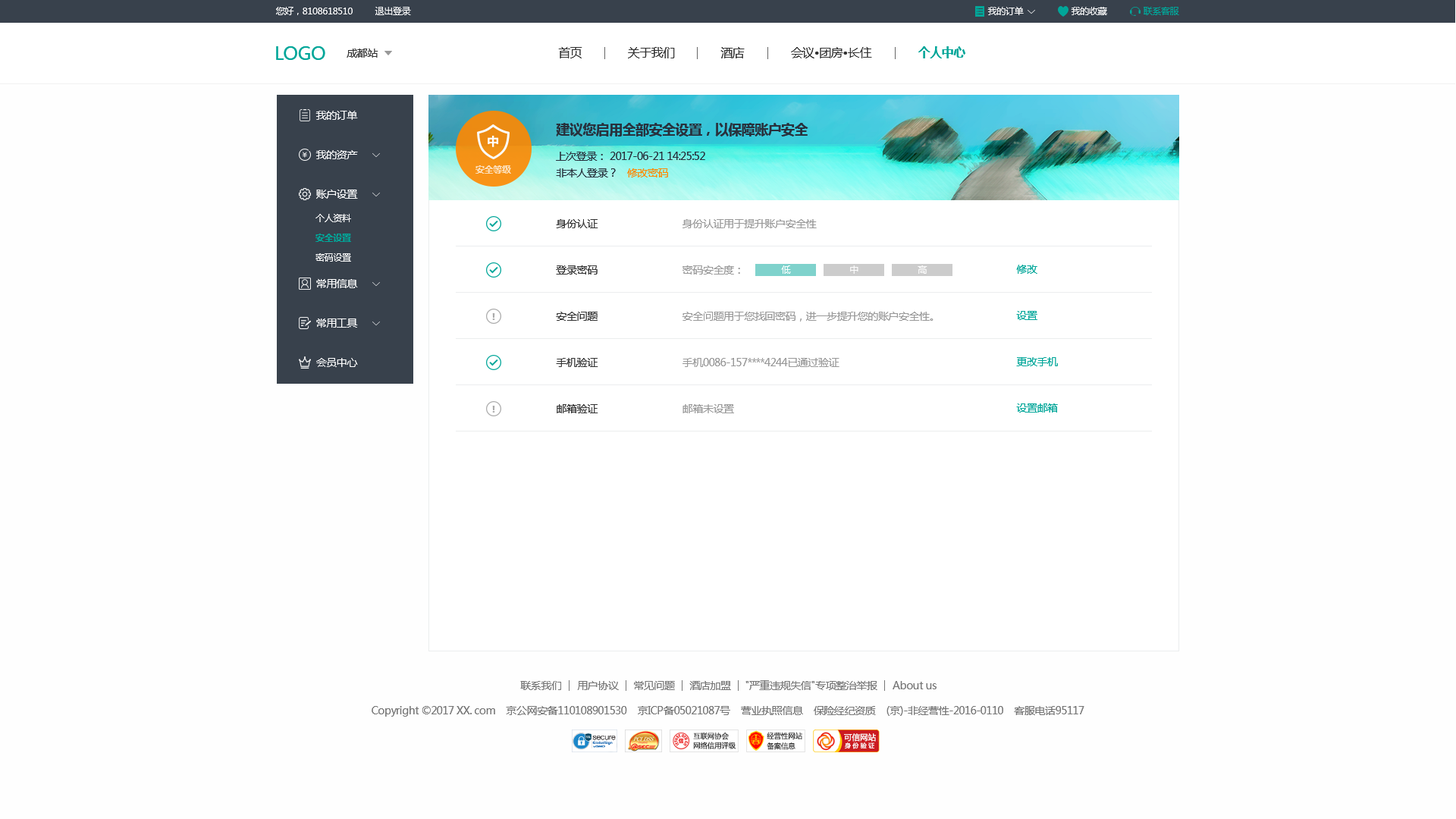
<style>
.page{position:relative;width:1456px;height:819px;background:#fefefe}
.page>*{position:absolute;margin:0}
.t1{font:9.1px "MicrosoftYaHei";letter-spacing:-0.03em;color:#ffffff}
.t2{font:9.1px "MicrosoftYaHei";letter-spacing:-0.03em;color:#00a699}
.t3{font:18.2px "MicrosoftYaHei";letter-spacing:-0.03em;color:#00a699}
.t4{font:10.6px "MicrosoftYaHei";letter-spacing:-0.03em;color:#333333}
.t5{font:12.1px "MicrosoftYaHei";letter-spacing:-0.03em;color:#333333}
.t6{font:12.1px "MicrosoftYaHei-Bold";letter-spacing:-0.03em;color:#00a699}
.t7{font:10.6px "MicrosoftYaHei";letter-spacing:-0.03em;color:#ffffff}
.t8{font:13.6px "MicrosoftYaHei-Bold";letter-spacing:-0.03em;color:#28313d}
.t9{font:12.2px "FZLTCHJW--GB1-0";letter-spacing:-0.03em;color:#ffffff}
.t10{font:10.6px "MicrosoftYaHei";letter-spacing:-0.03em;color:#28313d}
.t11{font:9.1px "MicrosoftYaHei-Bold";letter-spacing:-0.03em;color:#fddfba}
.t12{font:10.6px "MicrosoftYaHei";letter-spacing:-0.03em;color:#ff8800}
.t13{font:10.6px "MicrosoftYaHei";letter-spacing:-0.03em;color:#999999}
.t14{font:9.1px "MicrosoftYaHei-Bold";letter-spacing:-0.03em;color:#00a699}
.t15{font:9.1px "MicrosoftYaHei";letter-spacing:-0.03em;color:#fefefe}
.t16{font:10.6px "MicrosoftYaHei";letter-spacing:-0.03em;color:#00a699}
.t17{font:9.2px "MicrosoftYaHei-Bold";letter-spacing:-0.03em;color:#ababab;scale:1.23 1}
.t18{font:10.6px "MicrosoftYaHei";letter-spacing:-0.03em;color:#777777}
</style>
<div class="page">
<p class="t1" style="left:276px;top:7px;width:77px;height:8px">您好，8108618510</p>
<p class="t1" style="left:375px;top:7px;width:36px;height:8px">退出登录</p>
<p class="t1" style="left:987px;top:7px;width:37px;height:8px">我的订单</p>
<p class="t1" style="left:1071px;top:7px;width:36px;height:8px">我的收藏</p>
<p class="t2" style="left:1144px;top:7px;width:35px;height:8px">联系客服</p>
<p class="t3" style="left:276px;top:46px;width:49px;height:14px">LOGO</p>
<p class="t4" style="left:347px;top:49px;width:31px;height:9px">成都站</p>
<p class="t5" style="left:558px;top:47px;width:24px;height:11px">首页</p>
<p class="t5" style="left:628px;top:47px;width:47px;height:11px">关于我们</p>
<p class="t5" style="left:720px;top:47px;width:25px;height:11px">酒店</p>
<p class="t5" style="left:791px;top:47px;width:81px;height:11px">会议•团房•长住</p>
<p class="t6" style="left:918px;top:46px;width:47px;height:12px">个人中心</p>
<p class="t7" style="left:315px;top:111px;width:43px;height:9px">我的订单</p>
<p class="t8" style="left:556px;top:123px;width:252px;height:13px">建议您启用全部安全设置，以保障账户安全</p>
<p class="t9" style="left:488px;top:135px;width:11px;height:12px">中</p>
<p class="t7" style="left:315px;top:150px;width:43px;height:9px">我的资产</p>
<p class="t10" style="left:556px;top:152px;width:149px;height:9px">上次登录： 2017-06-21 14:25:52</p>
<p class="t11" style="left:475px;top:165px;width:36px;height:9px">安全等级</p>
<p class="t10" style="left:556px;top:168px;width:60px;height:9px">非本人登录？</p>
<p class="t12" style="left:627px;top:168px;width:41px;height:9px">修改密码</p>
<p class="t7" style="left:316px;top:190px;width:42px;height:9px">账户设置</p>
<p class="t1" style="left:315px;top:214px;width:36px;height:8px">个人资料</p>
<p class="t4" style="left:556px;top:219px;width:42px;height:9px">身份认证</p>
<p class="t13" style="left:682px;top:219px;width:135px;height:9px">身份认证用于提升账户安全性</p>
<p class="t14" style="left:315px;top:234px;width:36px;height:8px">安全设置</p>
<p class="t15" style="left:315px;top:253px;width:36px;height:9px">密码设置</p>
<p class="t4" style="left:556px;top:265px;width:42px;height:10px">登录密码</p>
<p class="t13" style="left:682px;top:265px;width:58px;height:10px">密码安全度：</p>
<p class="t1" style="left:781px;top:265px;width:10px;height:9px">低</p>
<p class="t1" style="left:850px;top:265px;width:8px;height:9px">中</p>
<p class="t1" style="left:918px;top:265px;width:9px;height:9px">高</p>
<p class="t16" style="left:1016px;top:265px;width:21px;height:9px">修改</p>
<p class="t7" style="left:316px;top:279px;width:42px;height:9px">常用信息</p>
<p class="t17" style="left:492px;top:313px;width:3px;height:7px">!</p>
<p class="t4" style="left:556px;top:312px;width:42px;height:9px">安全问题</p>
<p class="t13" style="left:682px;top:312px;width:251px;height:10px">安全问题用于您找回密码，进一步提升您的账户安全性。</p>
<p class="t16" style="left:1016px;top:311px;width:21px;height:9px">设置</p>
<p class="t7" style="left:316px;top:318px;width:42px;height:10px">常用工具</p>
<p class="t7" style="left:316px;top:358px;width:42px;height:9px">会员中心</p>
<p class="t4" style="left:556px;top:358px;width:42px;height:9px">手机验证</p>
<p class="t13" style="left:682px;top:358px;width:157px;height:9px">手机0086-157****4244已通过验证</p>
<p class="t16" style="left:1016px;top:357px;width:42px;height:9px">更改手机</p>
<p class="t17" style="left:492px;top:406px;width:3px;height:7px">!</p>
<p class="t4" style="left:557px;top:404px;width:41px;height:9px">邮箱验证</p>
<p class="t13" style="left:682px;top:404px;width:52px;height:9px">邮箱未设置</p>
<p class="t16" style="left:1016px;top:403px;width:42px;height:10px">设置邮箱</p>
<p class="t18" style="left:520px;top:681px;width:41px;height:9px">联系我们</p>
<p class="t18" style="left:577px;top:681px;width:42px;height:9px">用户协议</p>
<p class="t18" style="left:634px;top:681px;width:41px;height:9px">常见问题</p>
<p class="t18" style="left:689px;top:681px;width:42px;height:9px">酒店加盟</p>
<p class="t18" style="left:745px;top:680px;width:132px;height:10px">"严重违规失信"专项整治举报</p>
<p class="t18" style="left:893px;top:681px;width:44px;height:8px">About us</p>
<p class="t18" style="left:372px;top:706px;width:712px;height:11px">Copyright ©2017 XX. com    京公网安备110108901530    京ICP备05021087号    营业执照信息    保险经纪资质    (京)-非经营性-2016-0110    客服电话95117</p>
</div>
